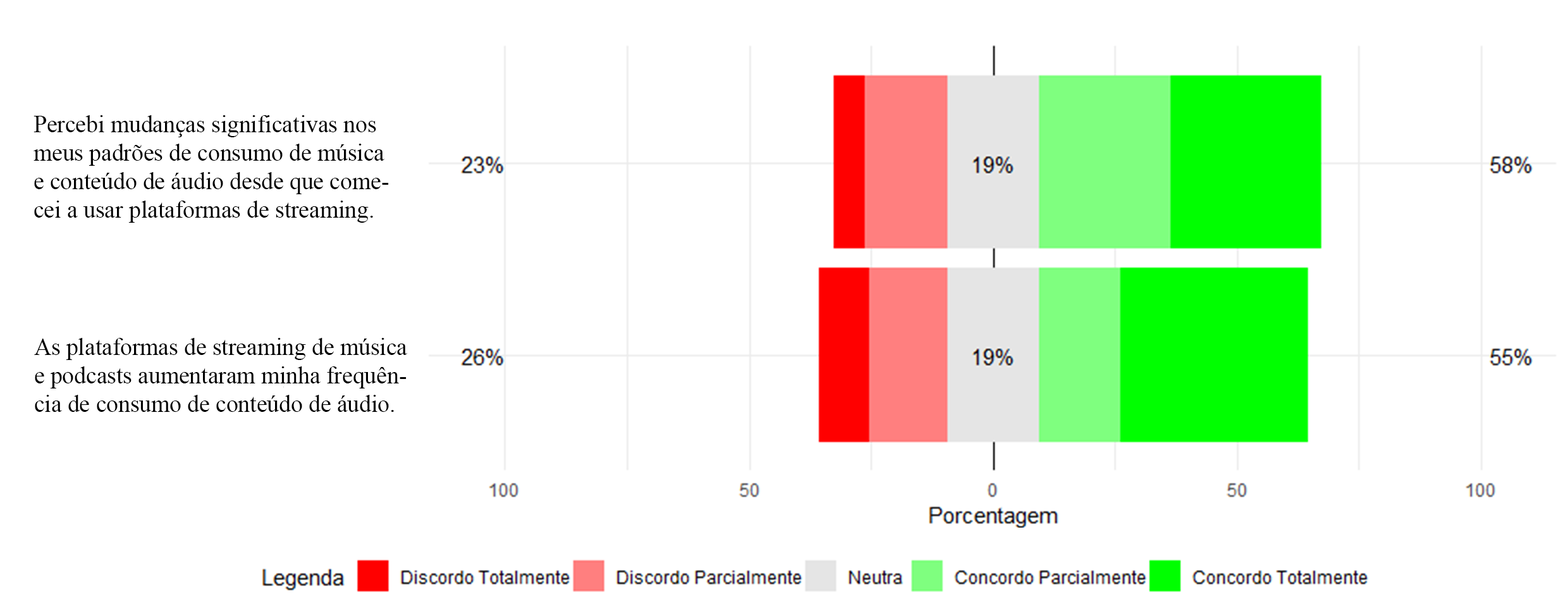
<style>
.page{position:relative;width:1568px;height:615px;background:#ffffff}
.page>*{position:absolute;margin:0}
.t1{font:23.7px "TimesNewRomanPSMT";color:#000000}
</style>
<div class="page">
<p class="t1" style="left:34px;top:115px;width:355px;height:108px">Percebi mudanças significativas nos <br>meus padrões de consumo de música <br>e conteúdo de áudio desde que come-<br>cei a usar plataformas de streaming.</p>
<p class="t1" style="left:34px;top:338px;width:373px;height:74px">As plataformas de streaming de música<br>e podcasts aumentaram minha frequên-<br>cia de consumo de conteúdo de áudio.</p>
</div>
